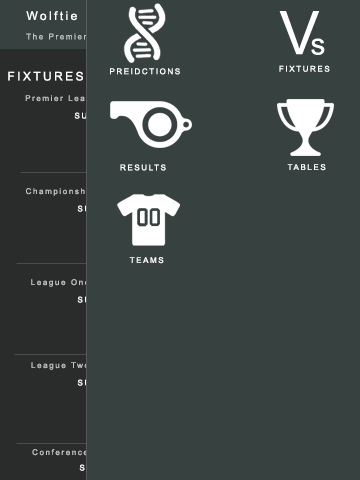
<style>
.page{position:relative;width:360px;height:480px;background:#374140}
.page>*{position:absolute;margin:0}
.t1{font:12px "ArialMT";letter-spacing:0.2em}
.t2{font:8px "ArialMT";letter-spacing:0.2em;color:#ffffff}
.t3{font:12px "ArialMT";letter-spacing:0.2em;color:#ffffff}
.t4{font:8px "ArialMT";letter-spacing:0.2em;color:#c2c2c2}
</style>
<div class="page">
<p class="t1" style="left:26px;top:11px;width:120px;height:10px">Wolftie Predicts</p>
<p class="t2" style="left:279px;top:65px;width:51px;height:7px">FIXTURES</p>
<p class="t3" style="left:8px;top:71px;width:75px;height:10px">FIXTURES</p>
<p class="t2" style="left:110px;top:68px;width:70px;height:7px">PREIDCTIONS</p>
<p class="t4" style="left:25px;top:95px;width:78px;height:8px">Premier League</p>
<p class="t2" style="left:120px;top:164px;width:46px;height:7px">RESULTS</p>
<p class="t2" style="left:287px;top:164px;width:39px;height:7px">TABLES</p>
<p class="t4" style="left:26px;top:188px;width:69px;height:8px">Championship</p>
<p class="t2" style="left:129px;top:257px;width:35px;height:7px">TEAMS</p>
<p class="t4" style="left:31px;top:279px;width:58px;height:8px">League One</p>
<p class="t4" style="left:31px;top:362px;width:58px;height:8px">League Two</p>
<p class="t4" style="left:32px;top:449px;width:56px;height:7px">Conference</p>
</div>
